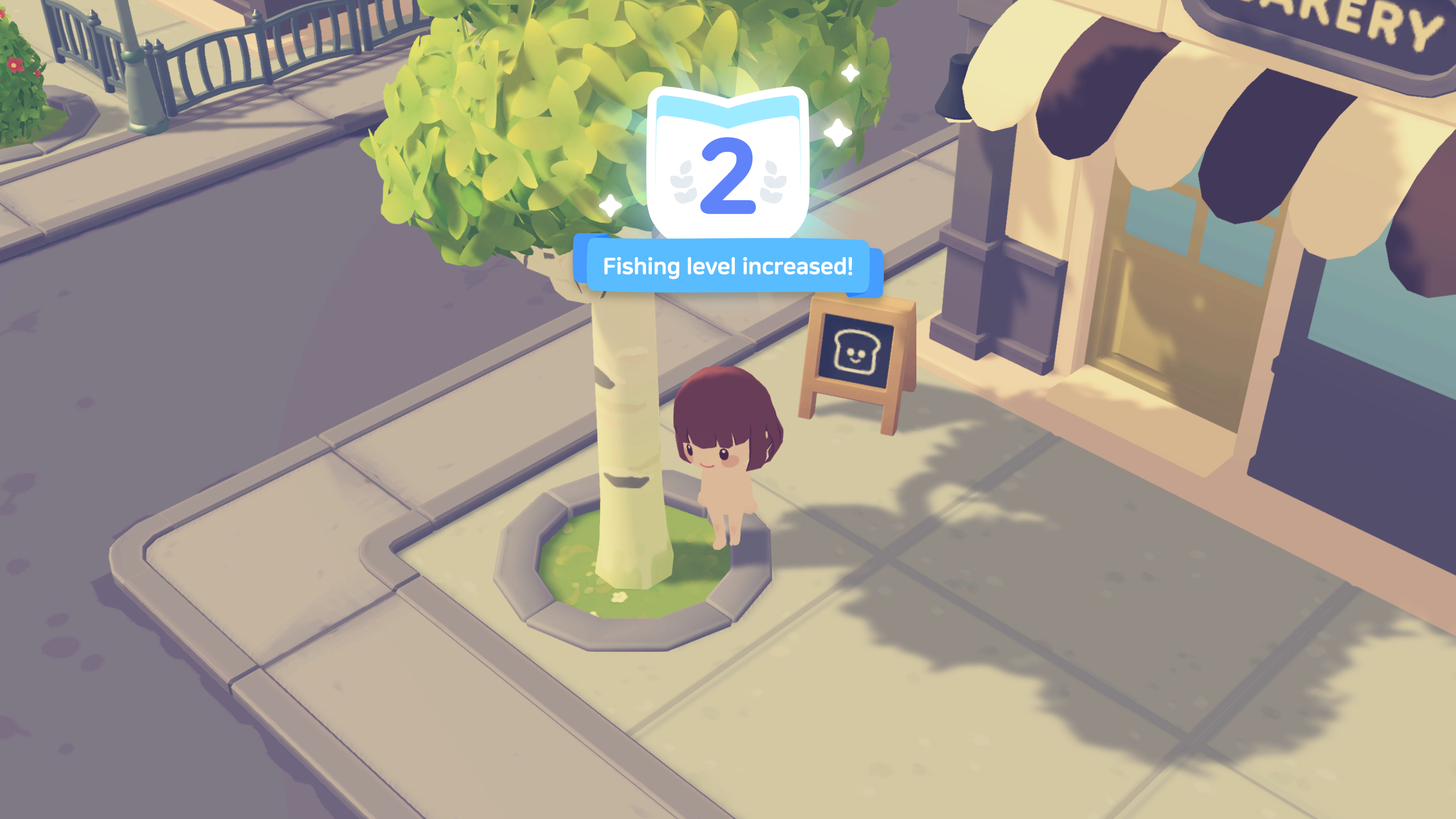
<style>
.page{position:relative;width:1456px;height:819px}
.page>*{position:absolute;margin:0}
.t1{font:102.4px "NanumSquareRoundOTFEB";letter-spacing:-0.01em;color:#6083fa;font-weight:bold}
.t2{font:22.7px "NanumSquareRoundOTFEB";letter-spacing:-0.03em;color:#ffffff;font-weight:bold}
</style>
<div class="page">
<p class="t1" style="left:700px;top:137px;width:56px;height:77px">2</p>
<p class="t2" style="left:604px;top:257px;width:249px;height:22px">Fishing level increased!</p>
</div>
